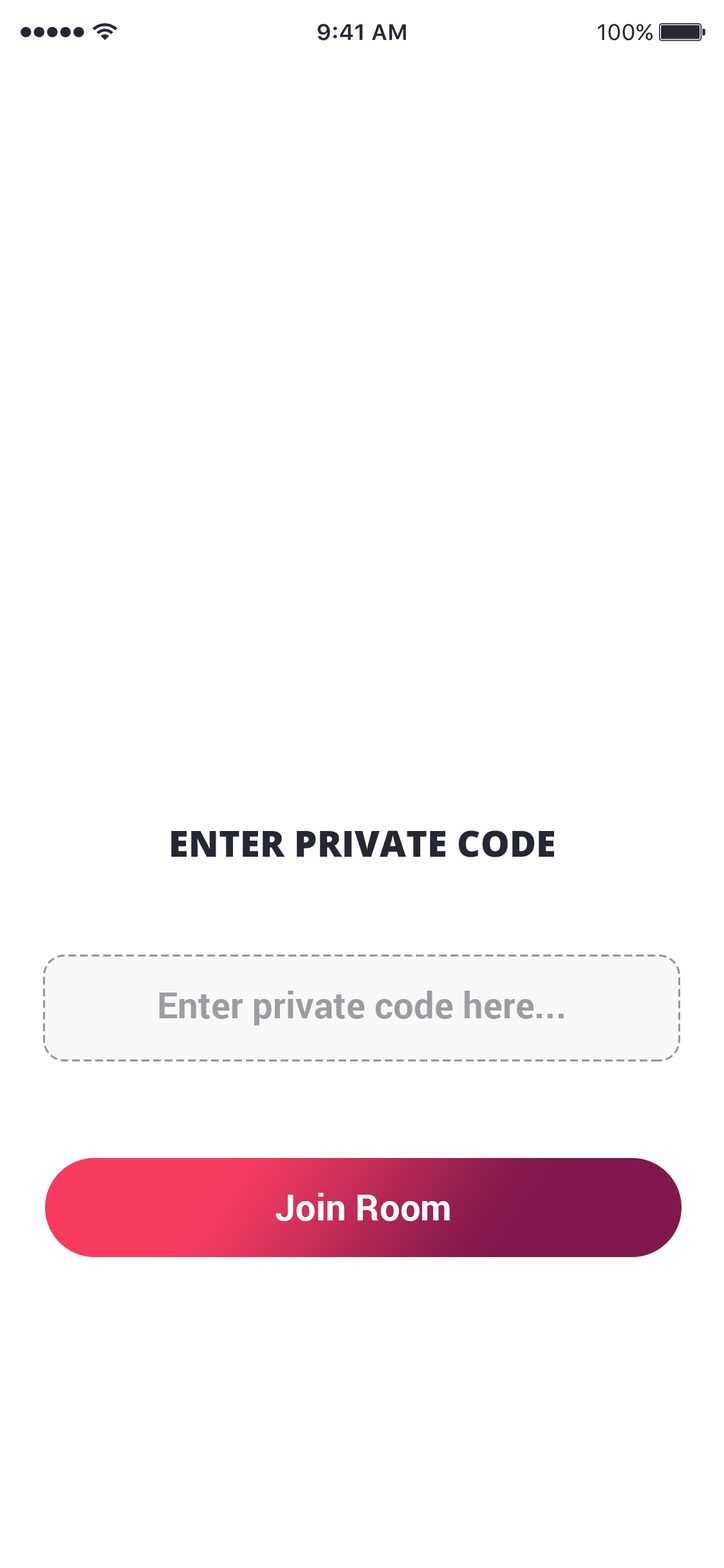
<style>
.page{position:relative;width:724px;height:1568px;background:#ffffff}
.page>*{position:absolute;margin:0}
.t1{font:36px "OpenSans-Extrabold";letter-spacing:0.005em;color:#252832}
.t2{font:36px "Roboto-Bold";letter-spacing:0.005em;color:#9c9da2}
.t3{font:36px "Roboto-Bold";letter-spacing:0.005em;color:#ffffff}
</style>
<div class="page">
<p class="t1" style="left:171px;top:830px;width:383px;height:27px">ENTER PRIVATE CODE</p>
<p class="t2" style="left:159px;top:991px;width:405px;height:34px">Enter private code here...</p>
<p class="t3" style="left:275px;top:1193px;width:175px;height:28px">Join Room</p>
</div>
